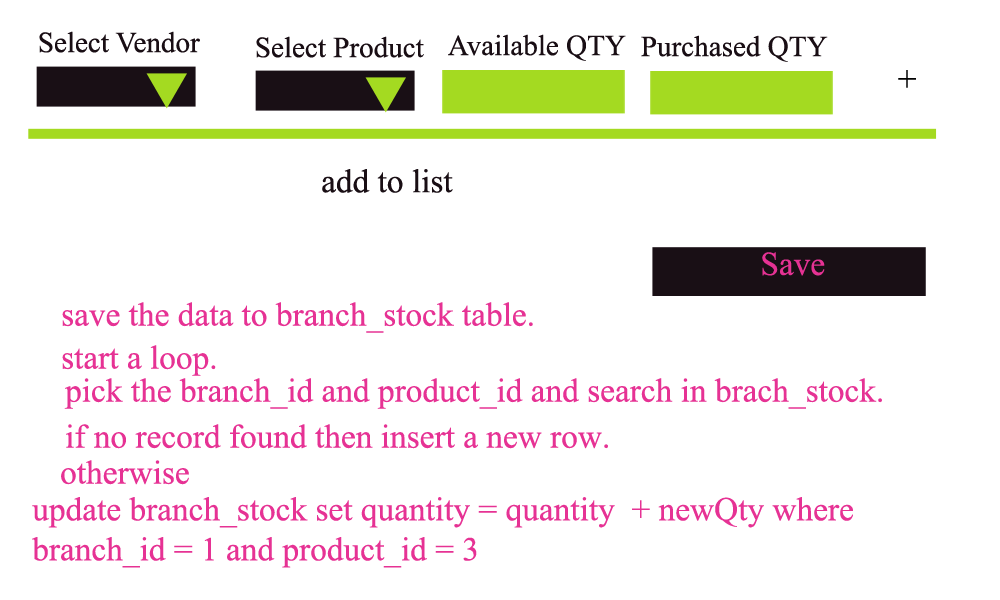
<style>
.page{position:relative;width:1000px;height:600px;background:#ffffff}
.page>*{position:absolute;margin:0}
.t1{font:29.1px "TimesNewRomanPSMT";color:#190e14}
.t2{font:33.3px "TimesNewRomanPSMT";color:#010101}
.t3{font:33.3px "TimesNewRomanPSMT";color:#190e14}
.t4{font:33.3px "TimesNewRomanPSMT";color:#e63294}
</style>
<div class="page">
<p class="t1" style="left:39px;top:31px;width:161px;height:22px">Select Vendor</p>
<p class="t1" style="left:256px;top:36px;width:168px;height:22px">Select Product</p>
<p class="t1" style="left:448px;top:34px;width:178px;height:27px">Available QTY</p>
<p class="t1" style="left:641px;top:35px;width:187px;height:27px">Purchased QTY</p>
<p class="t2" style="left:898px;top:70px;width:18px;height:18px">+</p>
<p class="t3" style="left:322px;top:169px;width:131px;height:24px">add to list</p>
<p class="t4" style="left:762px;top:252px;width:63px;height:24px">Save</p>
<p class="t4" style="left:62px;top:302px;width:471px;height:31px">save the data to branch_stock table.</p>
<p class="t4" style="left:62px;top:345px;width:154px;height:31px">start a loop.</p>
<p class="t4" style="left:64px;top:378px;width:818px;height:31px">pick the branch_id and product_id and search in brach_stock.</p>
<p class="t4" style="left:66px;top:424px;width:542px;height:25px">if no record found then insert a new row.</p>
<p class="t4" style="left:61px;top:460px;width:128px;height:25px">otherwise</p>
<p class="t4" style="left:32px;top:497px;width:821px;height:71px">update branch_stock set quantity = quantity  + newQty where branch_id = 1 and product_id = 3</p>
</div>
